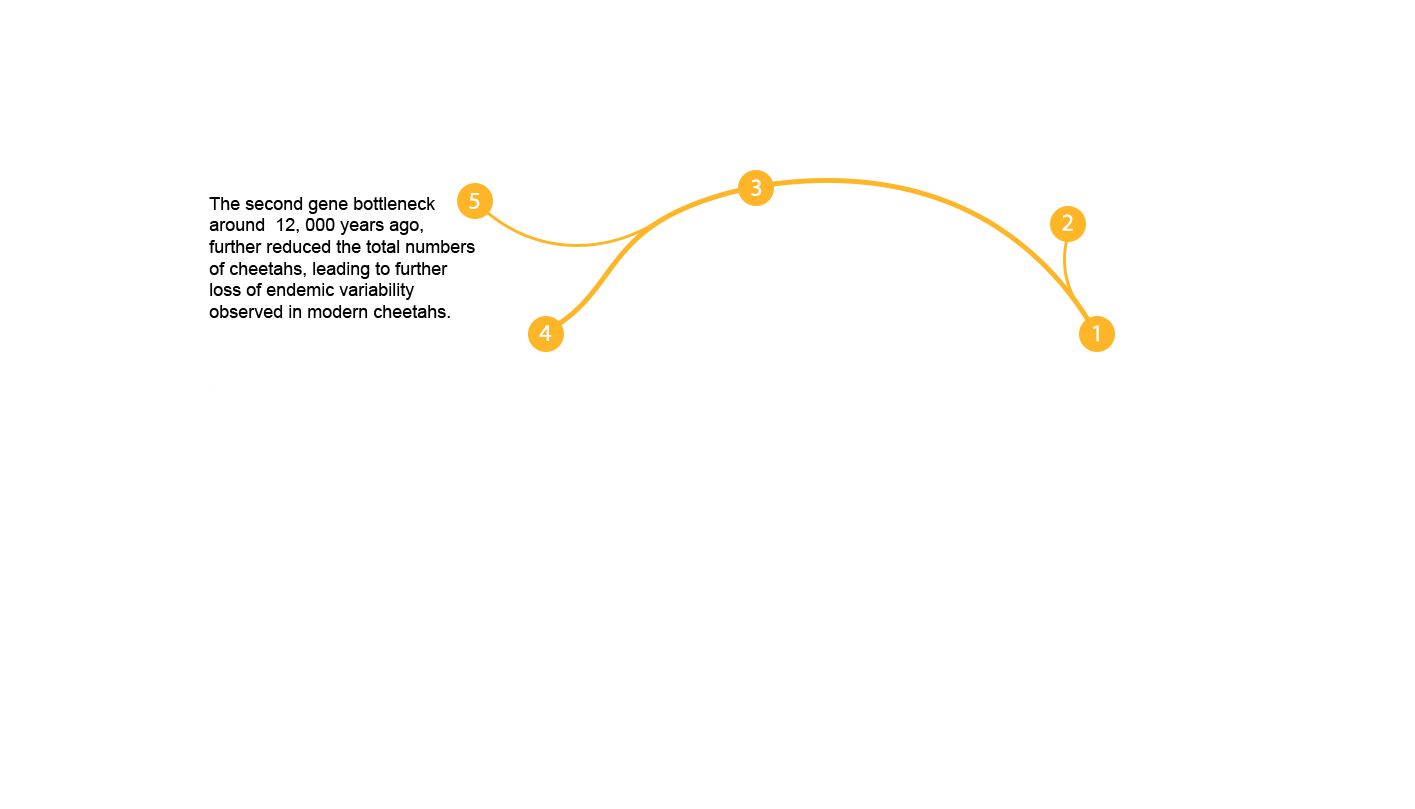
<style>
.page{position:relative;width:1415px;height:809px;background:#ffffff}
.page>*{position:absolute;margin:0}
.t1{font:18px "ArialMT";color:#000000}
</style>
<div class="page">
<p class="t1" style="left:209px;top:197px;width:266px;height:121px">The second gene bottleneck<br>around  12, 000 years ago,<br>further reduced the total numbers<br>of cheetahs, leading to further<br>loss of endemic variability<br>observed in modern cheetahs.</p>
</div>
